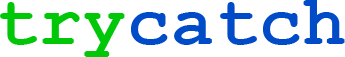
<style>
.page{position:relative;width:345px;height:57px;background:#ffffff}
.page>*{position:absolute;margin:0}
.t1{font:71px "CourierNewPS-BoldMT";letter-spacing:0.02em;color:#004bc8}
.t2{font:71px "CourierNewPS-BoldMT";letter-spacing:0.02em;color:#00c809}
</style>
<div class="page">
<p class="t1" style="left:0px;top:0px;width:345px;height:57px"><span class="t2">try</span>catch</p>
</div>
